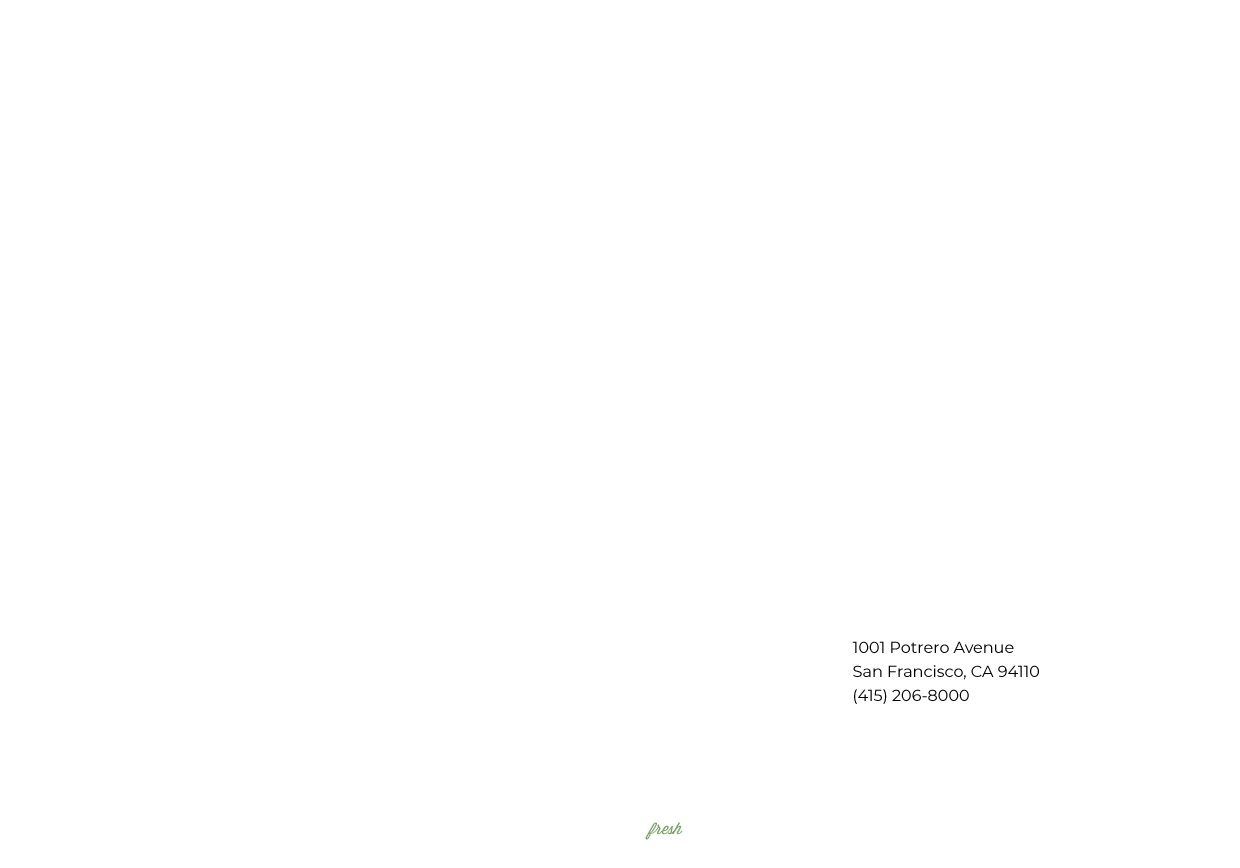
<style>
.page{position:relative;width:1240px;height:868px;background:#ffffff}
.page>*{position:absolute;margin:0}
.t1{font:16px/24px "Montserrat-Regular";color:#000000}
.t2{font:16px "Wisdom-Script";color:#77a466}
</style>
<div class="page">
<p class="t1" style="left:852px;top:641px;width:187px;height:63px">1001 Potrero Avenue<br>San Francisco, CA 94110<br>(415) 206-8000</p>
<p class="t2" style="left:645px;top:822px;width:38px;height:18px">fresh</p>
</div>
